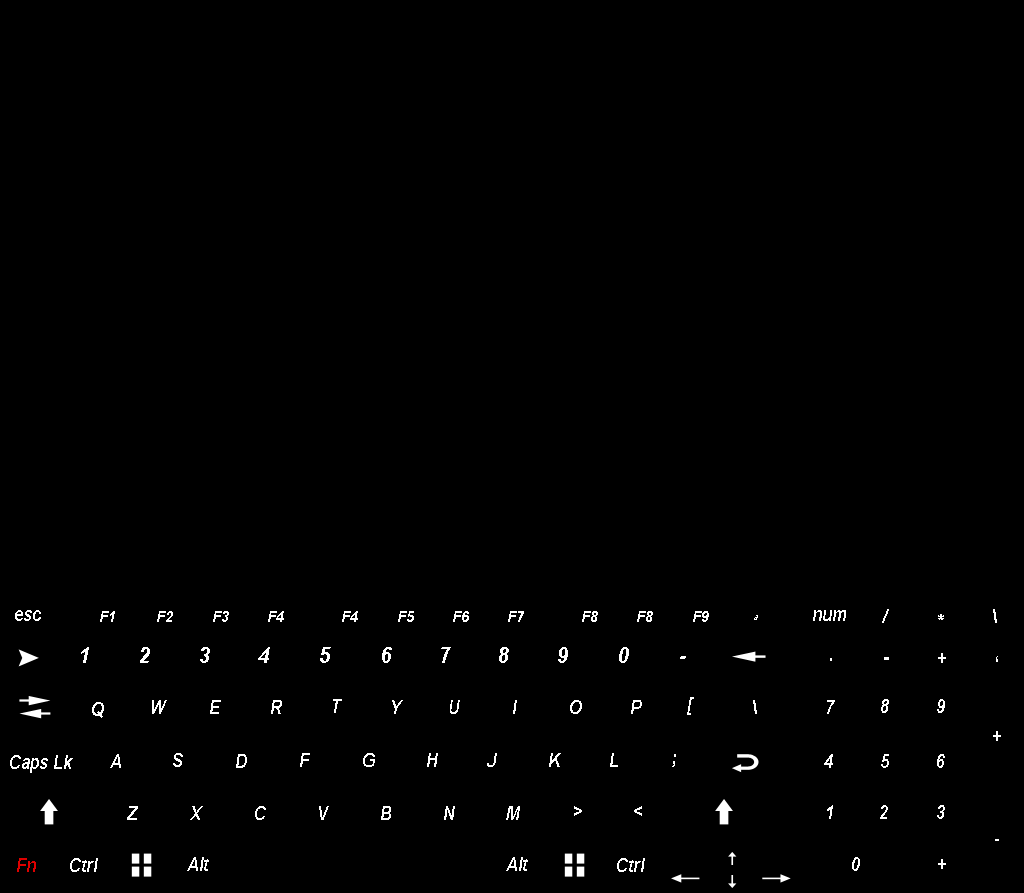
<style>
.page{position:relative;width:1024px;height:893px;background:#000000}
.page>*{position:absolute;margin:0}
.t1{font:18.9px "Arial-BoldItalicMT";color:#ffffff;scale:0.92 1}
.t2{font:15px "Arial-BoldItalicMT";color:#ffffff;scale:0.92 1}
.t3{font:10px "Arial-BoldItalicMT";color:#ffffff;scale:0.92 1}
.t4{font:21.8px "Arial-BoldItalicMT";color:#ffffff;scale:0.92 1}
.t5{font:18.9px "Arial-BoldItalicMT";color:#de0000;scale:0.92 1}
</style>
<div class="page">
<p class="t1" style="left:15px;top:610px;width:26px;height:11px">esc</p>
<p class="t2" style="left:100px;top:611px;width:15px;height:11px">F1</p>
<p class="t2" style="left:157px;top:611px;width:16px;height:11px">F2</p>
<p class="t2" style="left:213px;top:611px;width:16px;height:11px">F3</p>
<p class="t2" style="left:268px;top:611px;width:16px;height:11px">F4</p>
<p class="t2" style="left:342px;top:611px;width:16px;height:11px">F4</p>
<p class="t2" style="left:398px;top:611px;width:16px;height:11px">F5</p>
<p class="t2" style="left:453px;top:611px;width:16px;height:11px">F6</p>
<p class="t2" style="left:508px;top:611px;width:16px;height:11px">F7</p>
<p class="t2" style="left:582px;top:611px;width:16px;height:11px">F8</p>
<p class="t2" style="left:637px;top:611px;width:16px;height:11px">F8</p>
<p class="t2" style="left:693px;top:611px;width:16px;height:11px">F9</p>
<p class="t3" style="left:754px;top:615px;width:4px;height:5px">а</p>
<p class="t1" style="left:813px;top:610px;width:33px;height:11px">num</p>
<p class="t1" style="left:882px;top:609px;width:7px;height:14px">/</p>
<p class="t1" style="left:938px;top:614px;width:6px;height:6px">*</p>
<p class="t1" style="left:993px;top:609px;width:4px;height:14px">\</p>
<p class="t4" style="left:81px;top:647px;width:8px;height:16px">1</p>
<p class="t4" style="left:140px;top:647px;width:10px;height:16px">2</p>
<p class="t4" style="left:200px;top:647px;width:10px;height:16px">3</p>
<p class="t4" style="left:258px;top:647px;width:12px;height:16px">4</p>
<p class="t4" style="left:320px;top:647px;width:11px;height:16px">5</p>
<p class="t4" style="left:382px;top:647px;width:10px;height:16px">6</p>
<p class="t4" style="left:441px;top:647px;width:10px;height:16px">7</p>
<p class="t4" style="left:499px;top:647px;width:10px;height:16px">8</p>
<p class="t4" style="left:558px;top:647px;width:10px;height:16px">9</p>
<p class="t4" style="left:619px;top:647px;width:10px;height:16px">0</p>
<p class="t1" style="left:938px;top:653px;width:8px;height:10px">+</p>
<p class="t4" style="left:680px;top:656px;width:6px;height:3px">-</p>
<p class="t1" style="left:996px;top:656px;width:2px;height:6px">‘</p>
<p class="t1" style="left:92px;top:702px;width:12px;height:16px">Q</p>
<p class="t1" style="left:152px;top:700px;width:15px;height:14px">W</p>
<p class="t1" style="left:210px;top:700px;width:11px;height:14px">E</p>
<p class="t1" style="left:271px;top:700px;width:11px;height:14px">R</p>
<p class="t1" style="left:333px;top:699px;width:9px;height:14px">T</p>
<p class="t1" style="left:392px;top:700px;width:11px;height:14px">Y</p>
<p class="t1" style="left:450px;top:700px;width:10px;height:14px">U</p>
<p class="t1" style="left:513px;top:700px;width:4px;height:14px">I</p>
<p class="t1" style="left:570px;top:700px;width:12px;height:14px">O</p>
<p class="t1" style="left:631px;top:700px;width:11px;height:14px">P</p>
<p class="t1" style="left:687px;top:697px;width:7px;height:18px">[</p>
<p class="t1" style="left:753px;top:700px;width:4px;height:14px">\</p>
<p class="t1" style="left:827px;top:700px;width:8px;height:14px">7</p>
<p class="t1" style="left:881px;top:699px;width:8px;height:14px">8</p>
<p class="t1" style="left:937px;top:699px;width:8px;height:14px">9</p>
<p class="t1" style="left:993px;top:731px;width:8px;height:10px">+</p>
<p class="t1" style="left:10px;top:755px;width:63px;height:18px">Caps Lk</p>
<p class="t1" style="left:110px;top:754px;width:11px;height:14px">A</p>
<p class="t1" style="left:173px;top:753px;width:10px;height:14px">S</p>
<p class="t1" style="left:236px;top:754px;width:11px;height:14px">D</p>
<p class="t1" style="left:300px;top:753px;width:10px;height:14px">F</p>
<p class="t1" style="left:363px;top:753px;width:12px;height:14px">G</p>
<p class="t1" style="left:427px;top:753px;width:11px;height:14px">H</p>
<p class="t1" style="left:487px;top:753px;width:10px;height:14px">J</p>
<p class="t1" style="left:549px;top:753px;width:12px;height:14px">K</p>
<p class="t1" style="left:610px;top:753px;width:8px;height:14px">L</p>
<p class="t1" style="left:672px;top:754px;width:4px;height:13px">;</p>
<p class="t1" style="left:824px;top:754px;width:9px;height:14px">4</p>
<p class="t1" style="left:881px;top:754px;width:8px;height:14px">5</p>
<p class="t1" style="left:937px;top:754px;width:8px;height:14px">6</p>
<p class="t1" style="left:127px;top:806px;width:11px;height:14px">Z</p>
<p class="t1" style="left:190px;top:806px;width:13px;height:14px">X</p>
<p class="t1" style="left:255px;top:806px;width:11px;height:14px">C</p>
<p class="t1" style="left:319px;top:806px;width:10px;height:14px">V</p>
<p class="t1" style="left:381px;top:806px;width:10px;height:14px">B</p>
<p class="t1" style="left:444px;top:806px;width:11px;height:14px">N</p>
<p class="t1" style="left:506px;top:806px;width:14px;height:14px">M</p>
<p class="t1" style="left:574px;top:806px;width:8px;height:10px">&gt;</p>
<p class="t1" style="left:634px;top:806px;width:8px;height:10px;rotate:180deg">&gt;</p>
<p class="t1" style="left:827px;top:805px;width:6px;height:14px">1</p>
<p class="t1" style="left:880px;top:805px;width:8px;height:14px">2</p>
<p class="t1" style="left:937px;top:805px;width:8px;height:14px">3</p>
<p class="t1" style="left:187px;top:857px;width:22px;height:14px">Alt</p>
<p class="t1" style="left:506px;top:857px;width:22px;height:14px">Alt</p>
<p class="t1" style="left:852px;top:857px;width:8px;height:14px">0</p>
<p class="t5" style="left:17px;top:858px;width:19px;height:14px">Fn</p>
<p class="t1" style="left:70px;top:858px;width:28px;height:14px">Ctrl</p>
<p class="t1" style="left:617px;top:858px;width:28px;height:14px">Ctrl</p>
<p class="t1" style="left:938px;top:859px;width:8px;height:10px">+</p>
</div>
